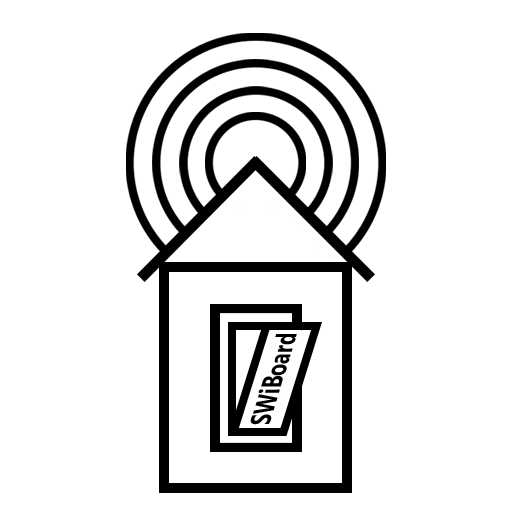
<style>
.page{position:relative;width:512px;height:512px;background:#ffffff}
.page>*{position:absolute;margin:0}
.t1{font:27.9px "NirmalaUI-Bold";color:#000000;scale:0.75 1}
</style>
<div class="page">
<p class="t1" style="left:250px;top:334px;width:47px;height:91px;rotate:-73deg">SWiBoard</p>
</div>
